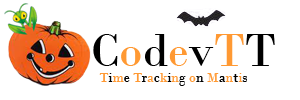
<style>
.page{position:relative;width:300px;height:100px;background:#ffffff}
.page>*{position:absolute;margin:0}
.t1{font:48px "BodoniMT";color:#000000}
.t2{font:48px "BodoniMT";color:#ff9933}
.t3{font:14px "BodoniMT";color:#ff9933}
.t4{font:14px "BodoniMT";color:#000000}
.t5{font:14px "BodoniMT";color:#010101}
</style>
<div class="page">
<p class="t1" style="left:93px;top:34px;width:182px;height:33px">C<span class="t2">o</span>d<span class="t2">e</span>v<span class="t2">T</span>T</p>
<p class="t3" style="left:99px;top:73px;width:148px;height:13px">T<span class="t4">i</span>m<span class="t4">e</span> T<span class="t4">r</span>a<span class="t4">c</span>k<span class="t4">i</span>n<span class="t4">g</span> o<span class="t4">n</span> M<span class="t5">a</span>n<span class="t4">t</span>i<span class="t4">s</span></p>
</div>
